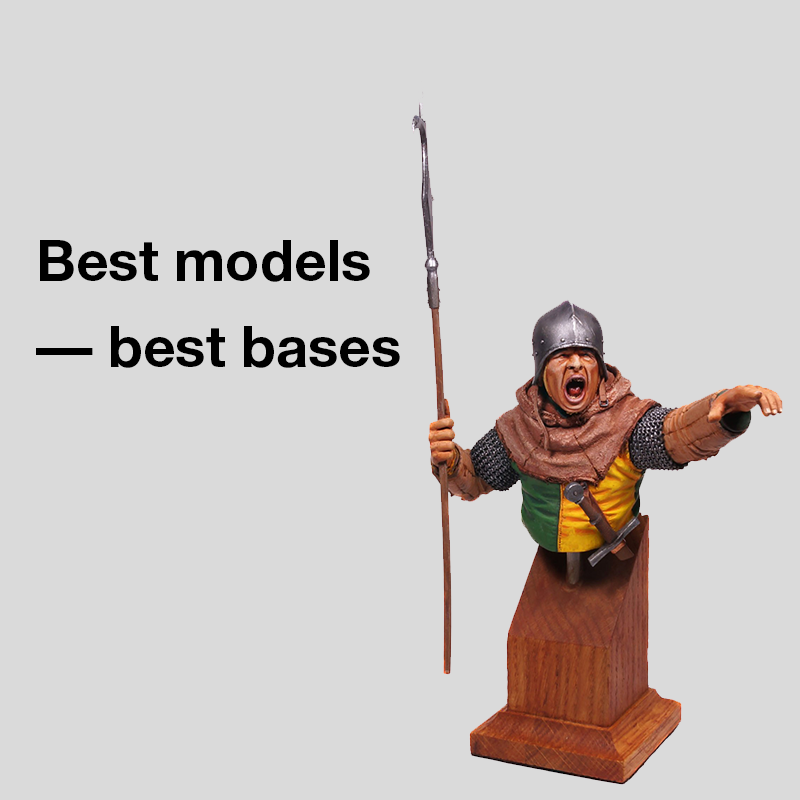
<style>
.page{position:relative;width:800px;height:800px;background:#dadada}
.page>*{position:absolute;margin:0}
.t1{font:56.5px "HelveticaNeueCyr-Bold";color:#000000}
</style>
<div class="page">
<p class="t1" style="left:36px;top:240px;width:364px;height:128px">Best models <br>— best bases</p>
</div>
